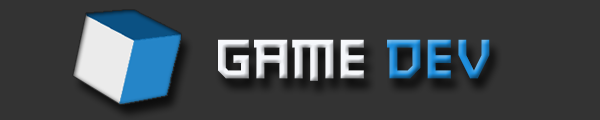
<style>
.page{position:relative;width:600px;height:120px;background:#333333}
.page>*{position:absolute;margin:0}
.t1{font:82px "journey";letter-spacing:0.01em}
</style>
<div class="page">
<p class="t1" style="left:218px;top:39px;width:272px;height:42px">gAME dEV</p>
</div>
